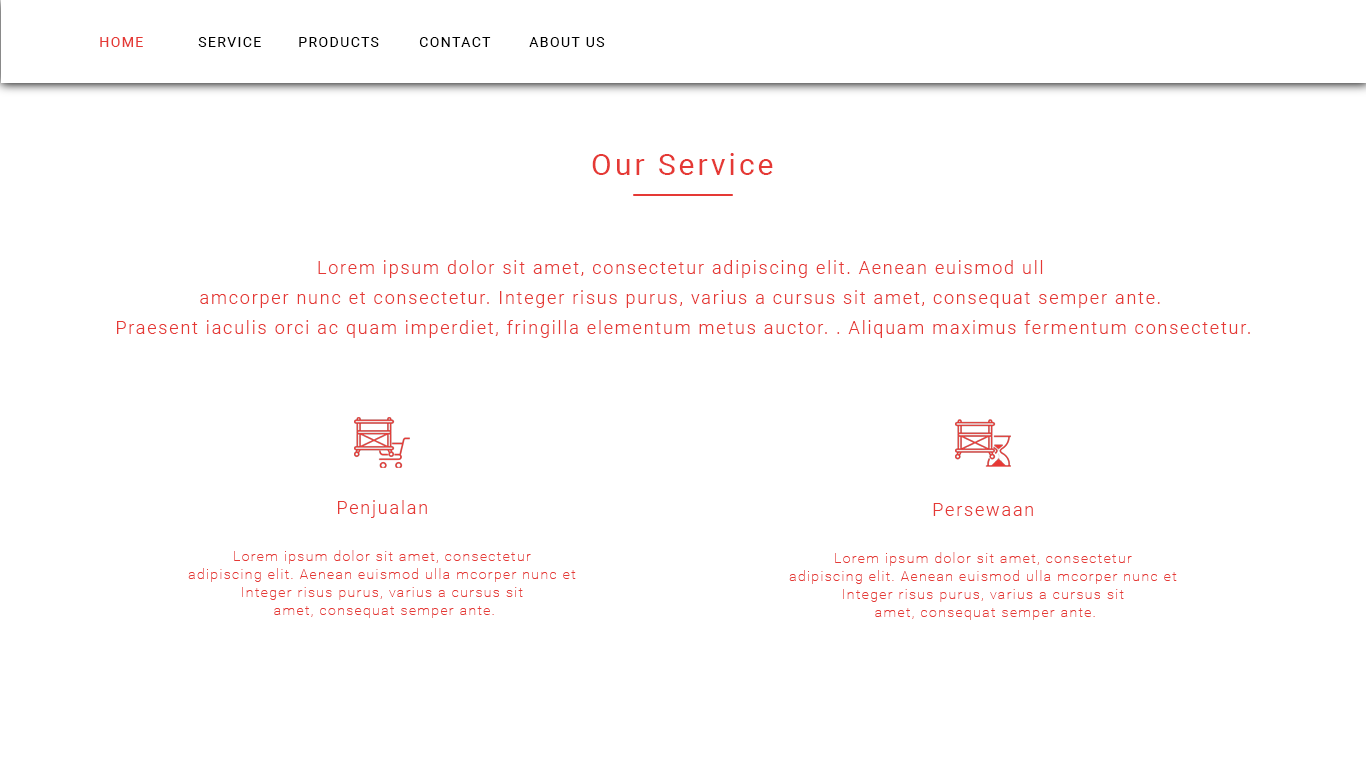
<style>
.page{position:relative;width:1366px;height:768px;background:#ffffff}
.page>*{position:absolute;margin:0}
.t1{font:14px "Roboto-Regular";letter-spacing:0.1em;color:#e53935}
.t2{font:14px "Roboto-Regular";letter-spacing:0.1em;color:#000000}
.t3{font:30px "Roboto-Regular";letter-spacing:0.1em;color:#e53935}
.t4{font:18px/30px "Roboto-Light";letter-spacing:0.1em;color:#e53935}
.t5{font:18px "Roboto-Light";letter-spacing:0.1em;color:#e53935}
.t6{font:14px/18px "Roboto-Thin";letter-spacing:0.1em;color:#e53935}
</style>
<div class="page">
<p class="t1" style="left:100px;top:37px;width:43px;height:10px">HOME</p>
<p class="t2" style="left:198px;top:37px;width:63px;height:10px">SERVICE</p>
<p class="t2" style="left:299px;top:37px;width:80px;height:10px">PRODUCTS</p>
<p class="t2" style="left:419px;top:37px;width:72px;height:10px">CONTACT</p>
<p class="t2" style="left:529px;top:37px;width:76px;height:10px">ABOUT US</p>
<p class="t3" style="left:592px;top:153px;width:181px;height:22px">Our Service</p>
<p class="t4" style="left:117px;top:260px;width:1133px;height:78px;text-align:center">Lorem ipsum dolor sit amet, consectetur adipiscing elit. Aenean euismod ull<br>amcorper nunc et consectetur. Integer risus purus, varius a cursus sit amet, consequat semper ante.<br> Praesent iaculis orci ac quam imperdiet, fringilla elementum metus auctor. . Aliquam maximus fermentum consectetur.</p>
<p class="t5" style="left:338px;top:500px;width:89px;height:18px">Penjualan</p>
<p class="t5" style="left:933px;top:503px;width:100px;height:13px">Persewaan</p>
<p class="t6" style="left:188px;top:550px;width:388px;height:68px;text-align:center">Lorem ipsum dolor sit amet, consectetur <br>adipiscing elit. Aenean euismod ulla mcorper nunc et <br>Integer risus purus, varius a cursus sit <br>amet, consequat semper ante.</p>
<p class="t6" style="left:789px;top:552px;width:388px;height:68px;text-align:center">Lorem ipsum dolor sit amet, consectetur <br>adipiscing elit. Aenean euismod ulla mcorper nunc et <br>Integer risus purus, varius a cursus sit <br>amet, consequat semper ante.</p>
</div>
